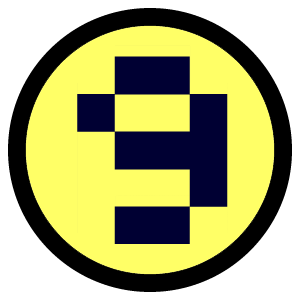
<style>
.page{position:relative;width:300px;height:300px;background:#ffff66}
.page>*{position:absolute;margin:0}
.t1{font:300px "04b03";color:#000033}
</style>
<div class="page">
<p class="t1" style="left:77px;top:56px;width:151px;height:188px">9</p>
</div>
